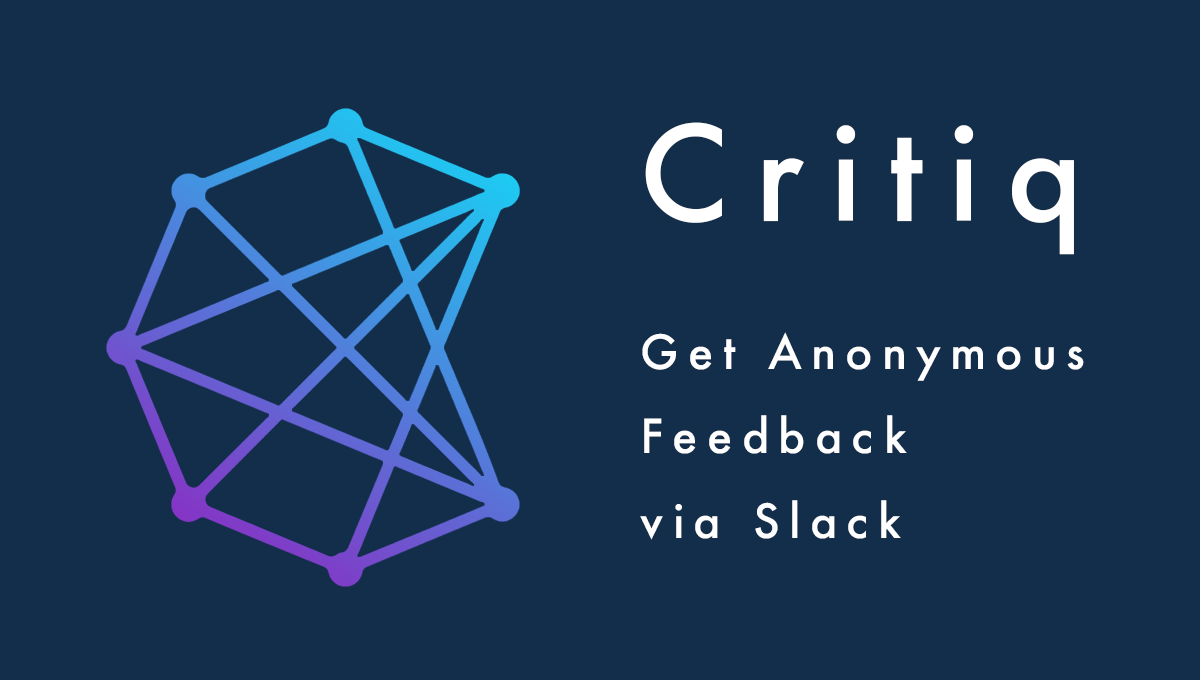
<style>
.page{position:relative;width:1200px;height:680px;background:#122e4b}
.page>*{position:absolute;margin:0}
.t1{font:128.1px "Futura-Medium";letter-spacing:0.2em;color:#ffffff}
.t2{font:45.8px/84.4px "Futura-Medium";letter-spacing:0.2em;color:#ffffff}
</style>
<div class="page">
<p class="t1" style="left:645px;top:122px;width:429px;height:133px">Critiq</p>
<p class="t2" style="left:640px;top:332px;width:444px;height:208px">Get Anonymous<br>Feedback<br>via Slack</p>
</div>
